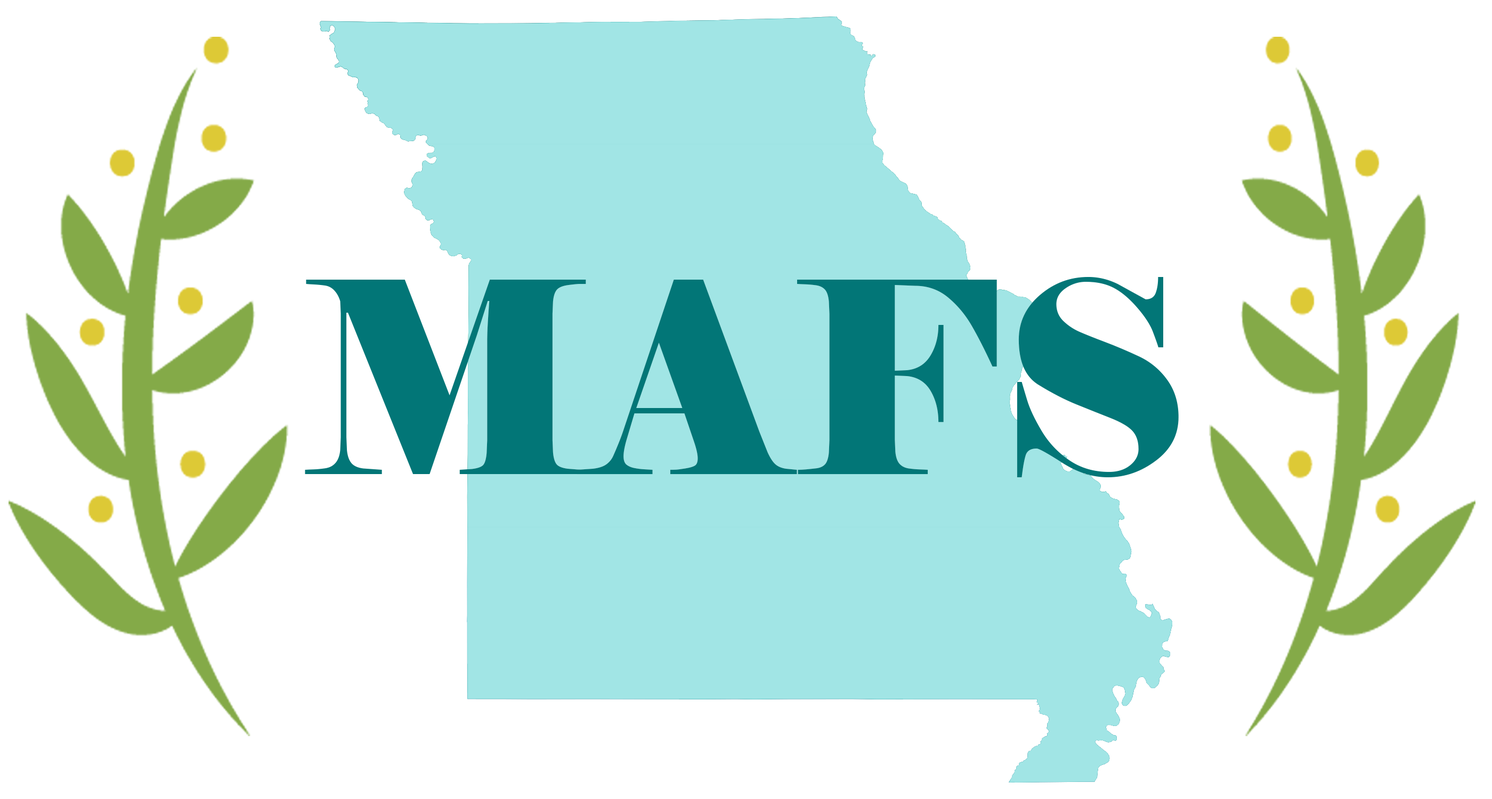
<style>
.page{position:relative;width:1492px;height:799px;background:#ffffff}
.page>*{position:absolute;margin:0}
.t1{font:266.4px "Elephant-Regular";color:#027677}
</style>
<div class="page">
<p class="t1" style="left:305px;top:277px;width:874px;height:200px">MAFS</p>
</div>
